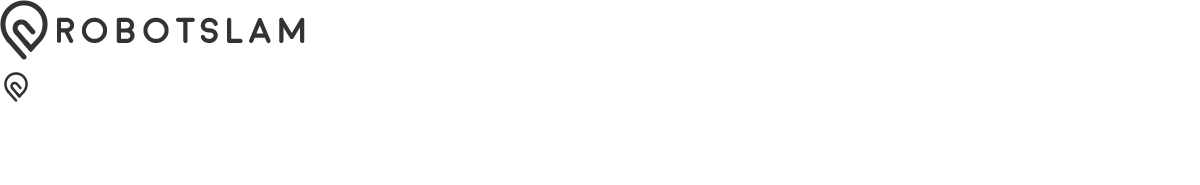
<style>
.page{position:relative;width:1200px;height:185px;background:#ffffff}
.page>*{position:absolute;margin:0}
.t1{font:36px "Moon-Bold";letter-spacing:0.1em;color:#333333}
</style>
<div class="page">
<p class="t1" style="left:57px;top:17px;width:248px;height:26px">RobotSlam</p>
</div>
